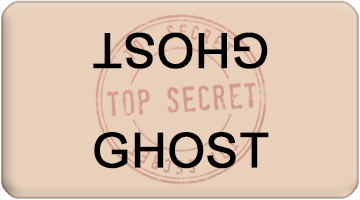
<style>
.page{position:relative;width:360px;height:200px;background:#e8d0bb}
.page>*{position:absolute;margin:0}
.t1{font:48px "ArialMT";color:#000000;font-weight:bold}
</style>
<div class="page">
<p class="t1" style="left:93px;top:32px;width:175px;height:37px;rotate:180deg">GHOST</p>
<p class="t1" style="left:94px;top:132px;width:175px;height:37px">GHOST</p>
</div>
